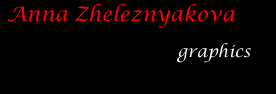
<style>
.page{position:relative;width:276px;height:94px;background:#000000}
.page>*{position:absolute;margin:0}
.t1{font:20px "LucidaCalligraphy-Italic";color:#ff0000}
.t2{font:16px "LucidaCalligraphy-Italic";color:#ffffff}
</style>
<div class="page">
<p class="t1" style="left:7px;top:4px;width:229px;height:24px">Anna Zheleznyakova</p>
<p class="t2" style="left:177px;top:43px;width:74px;height:20px">graphics</p>
</div>
